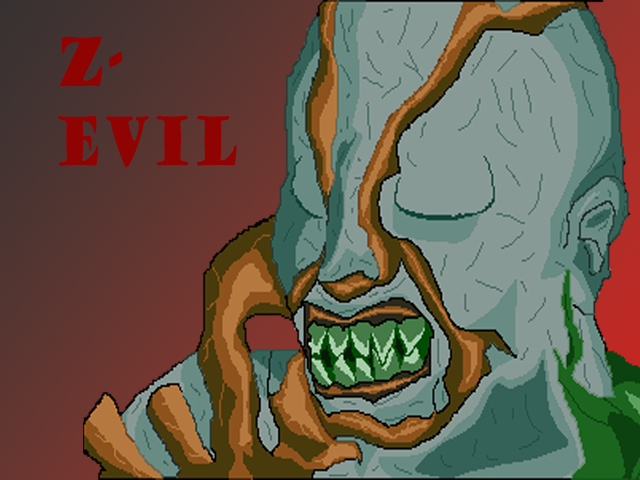
<style>
.page{position:relative;width:640px;height:480px}
.page>*{position:absolute;margin:0}
.t1{font:66px "GoudyStout";color:#8f0303;scale:0.61 1}
</style>
<div class="page">
<p class="t1" style="left:58px;top:36px;width:179px;height:132px">Z-<br>Evil</p>
</div>
